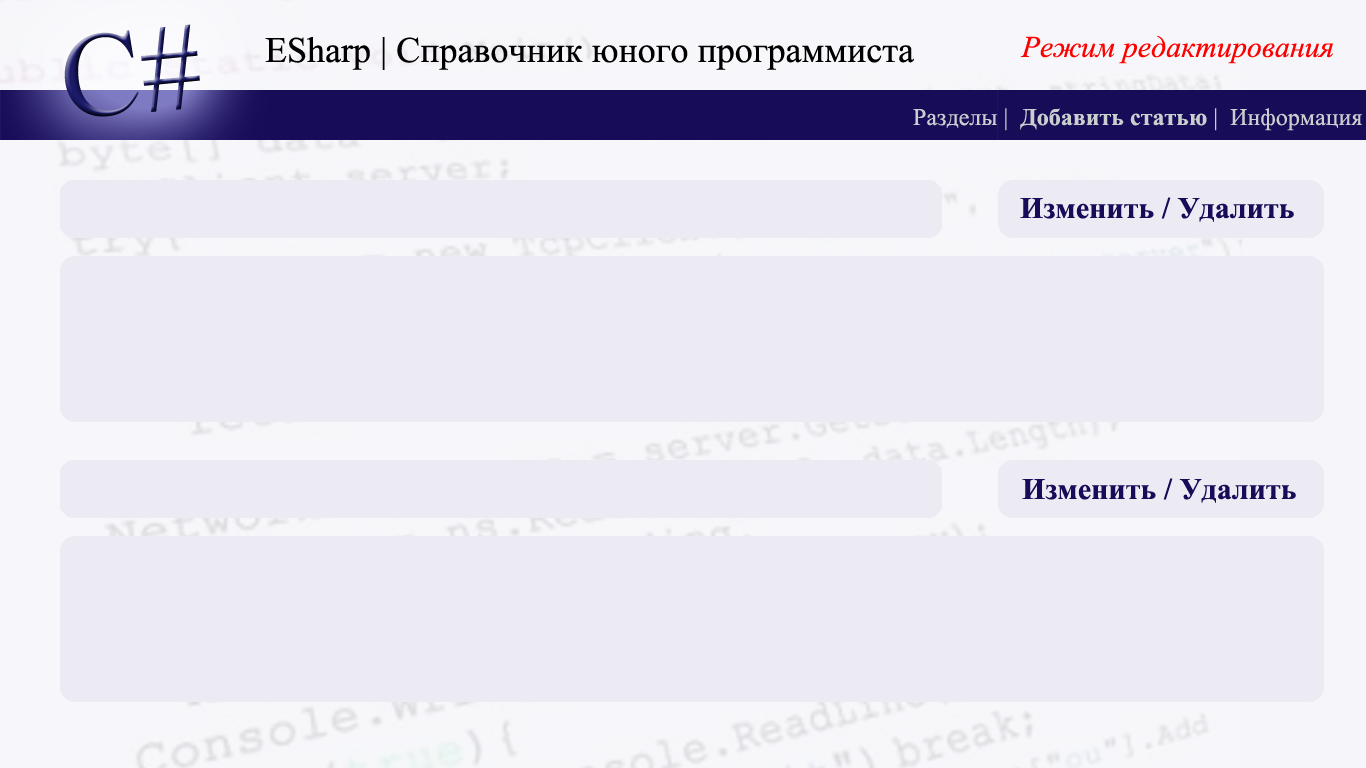
<style>
.page{position:relative;width:1366px;height:768px;background:#ecebf4}
.page>*{position:absolute;margin:0}
.t1{font:120.4px "TimesNewRomanPSMT"}
.t2{font:36px "TimesNewRomanPSMT";color:#000000}
.t3{font:30px "TimesNewRomanPS-ItalicMT";color:#ff0000}
.t4{font:24px "TimesNewRomanPS-BoldMT";color:#c9cecf}
.t5{font:24px "TimesNewRomanPSMT";color:#c9cecf}
.t6{font:30px "TimesNewRomanPS-BoldMT";color:#170c58}
</style>
<div class="page">
<p class="t1" style="left:64px;top:24px;width:136px;height:93px;rotate:-5deg">C#</p>
<p class="t2" style="left:265px;top:37px;width:649px;height:33px">ESharp | Справочник юного программиста</p>
<p class="t3" style="left:1020px;top:35px;width:313px;height:29px">Режим редактирования</p>
<p class="t4" style="left:913px;top:108px;width:449px;height:23px"><span class="t5">Разделы |  </span>Добавить статью<span class="t5"> |  Информация</span></p>
<p class="t6" style="left:1020px;top:197px;width:274px;height:25px">Изменить / Удалить</p>
<p class="t6" style="left:1020px;top:197px;width:274px;height:25px">Изменить / Удалить</p>
<p class="t6" style="left:1022px;top:478px;width:274px;height:25px">Изменить / Удалить</p>
<p class="t6" style="left:1022px;top:478px;width:274px;height:25px">Изменить / Удалить</p>
</div>
